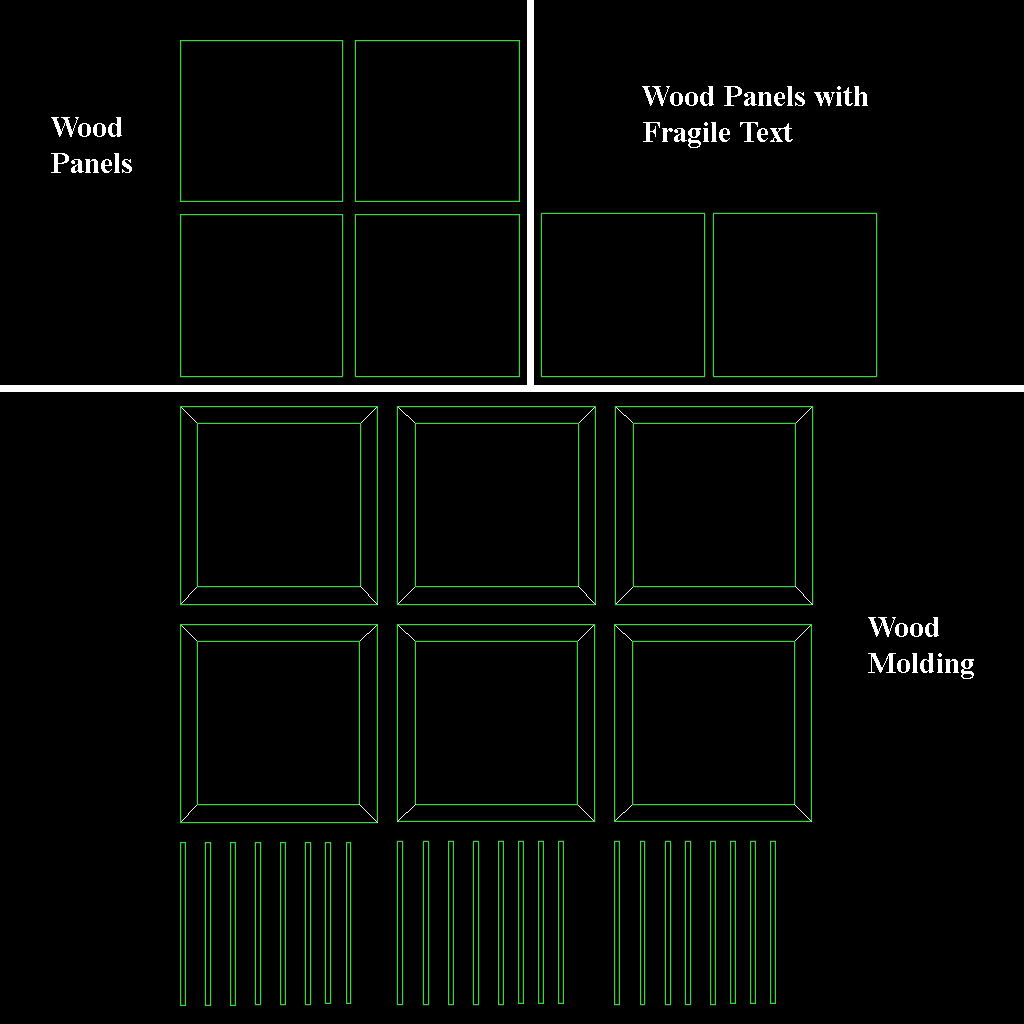
<style>
.page{position:relative;width:1024px;height:1024px;background:#000000}
.page>*{position:absolute;margin:0}
.t1{font:30px "TimesNewRomanPS-BoldMT";color:#ffffff}
</style>
<div class="page">
<p class="t1" style="left:642px;top:86px;width:226px;height:62px">Wood Panels with<br>Fragile Text</p>
<p class="t1" style="left:51px;top:117px;width:81px;height:56px">Wood<br>Panels</p>
<p class="t1" style="left:868px;top:617px;width:106px;height:62px">Wood <br>Molding</p>
</div>
